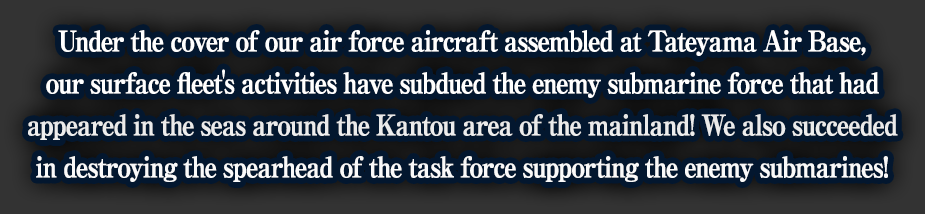
<style>
.page{position:relative;width:925px;height:214px;background:#03172f}
.page>*{position:absolute;margin:0}
.t1{font:28px/42px "RyuminPro-ExBold";letter-spacing:-0.08em;color:#ffffff;font-weight:bold;scale:0.9 1}
</style>
<div class="page">
<p class="t1" style="left:28px;top:30px;width:870px;height:152px;text-align:center">Under the cover of our air force aircraft assembled at Tateyama Air Base,<br>our surface fleet's activities have subdued the enemy submarine force that had<br>appeared in the seas around the Kantou area of the mainland! We also succeeded<br>in destroying the spearhead of the task force supporting the enemy submarines!</p>
</div>
